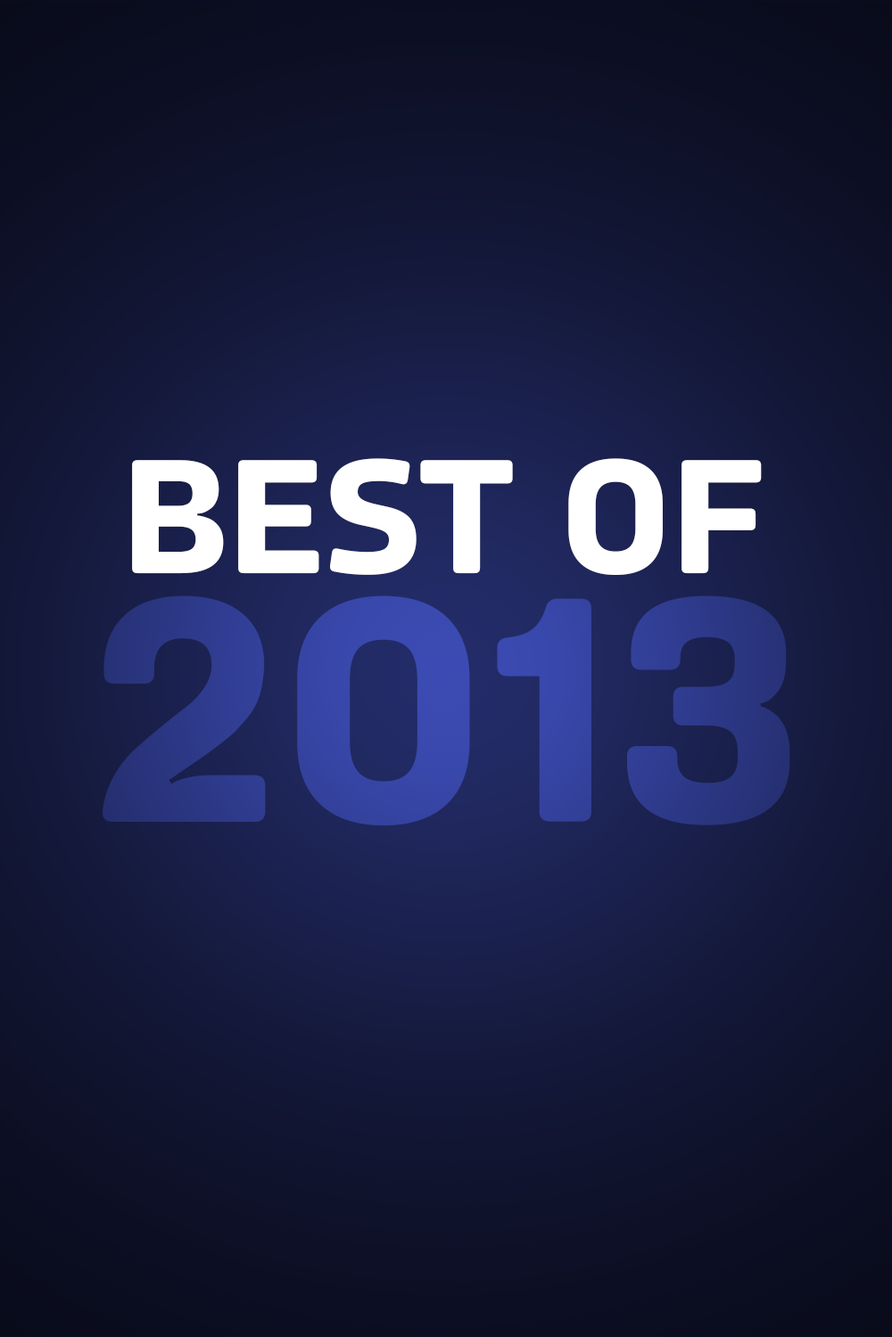
<style>
.page{position:relative;width:892px;height:1337px}
.page>*{position:absolute;margin:0}
.t1{font:161.8px "Amfibia-Bold";color:#ffffff;scale:1.03 1}
.t2{font:323.6px "Amfibia-Bold";scale:1.03 1}
</style>
<div class="page">
<p class="t1" style="left:132px;top:458px;width:629px;height:117px">BEST OF</p>
<p class="t2" style="left:102px;top:596px;width:688px;height:230px">2013</p>
</div>
